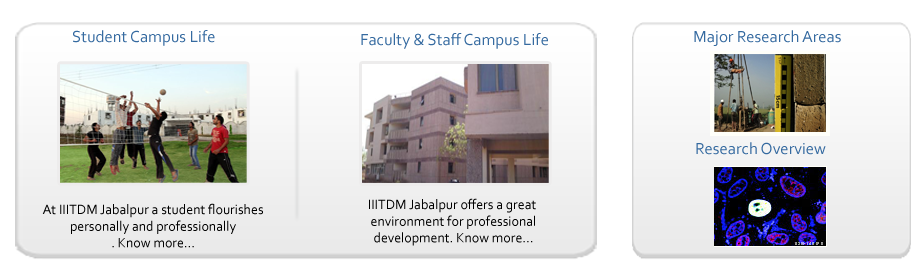
<style>
.page{position:relative;width:920px;height:280px;background:#ffffff}
.page>*{position:absolute;margin:0}
.t1{font:16.7px "Corbel";color:#356aa0}
.t2{font:13.9px "Corbel";color:#000000}
</style>
<div class="page">
<p class="t1" style="left:73px;top:30px;width:142px;height:16px">Student Campus Life</p>
<p class="t1" style="left:694px;top:30px;width:147px;height:16px">Major Research Areas</p>
<p class="t1" style="left:361px;top:33px;width:187px;height:16px">Faculty &amp; Staff Campus Life</p>
<p class="t1" style="left:696px;top:142px;width:130px;height:13px">Research Overview</p>
<p class="t2" style="left:369px;top:198px;width:167px;height:48px;text-align:center">IIITDM Jabalpur offers a great<br> environment for professional<br> development. Know more...</p>
<p class="t2" style="left:42px;top:203px;width:221px;height:45px;text-align:center">At IIITDM Jabalpur a student flourishes<br>personally and professionally<br>. Know more...</p>
</div>
